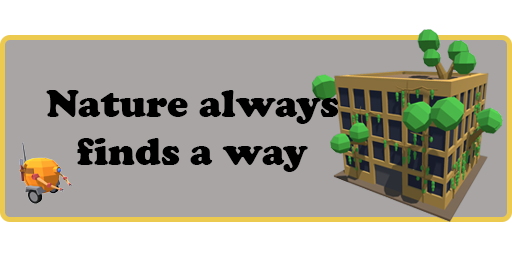
<style>
.page{position:relative;width:512px;height:256px;background:#a8a5a4}
.page>*{position:absolute;margin:0}
.t1{font:40px "CooperBlack";color:#000000}
</style>
<div class="page">
<p class="t1" style="left:46px;top:90px;width:293px;height:82px;text-align:center">Nature always<br>finds a way</p>
</div>
